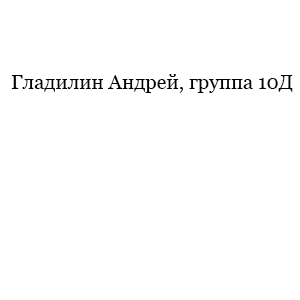
<style>
.page{position:relative;width:300px;height:300px;background:#ffffff}
.page>*{position:absolute;margin:0}
.t1{font:20px "Georgia";color:#000000}
</style>
<div class="page">
<p class="t1" style="left:11px;top:74px;width:282px;height:19px">Гладилин Андрей, группа 10Д</p>
</div>
